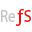
<style>
.page{position:relative;width:32px;height:32px;background:#ffffff}
.page>*{position:absolute;margin:0}
.t1{font:17.9px "MyriadPro-Regular";color:#c3c3c3;scale:0.83 1}
.t2{font:18px "MyriadPro-Regular";color:#f11010;scale:0.91 1}
.t3{font:18px "MyriadPro-Regular";color:#f11010;scale:1.1 1}
.t4{font:17.9px "MyriadPro-Regular";color:#f11010;scale:0.83 1}
</style>
<div class="page">
<p class="t1" style="left:1px;top:10px;width:14px;height:12px">Re</p>
<p class="t2" style="left:15px;top:13px;width:6px;height:13px">J</p>
<p class="t3" style="left:17px;top:9px;width:7px;height:13px">f</p>
<p class="t4" style="left:24px;top:10px;width:7px;height:12px">S</p>
</div>
